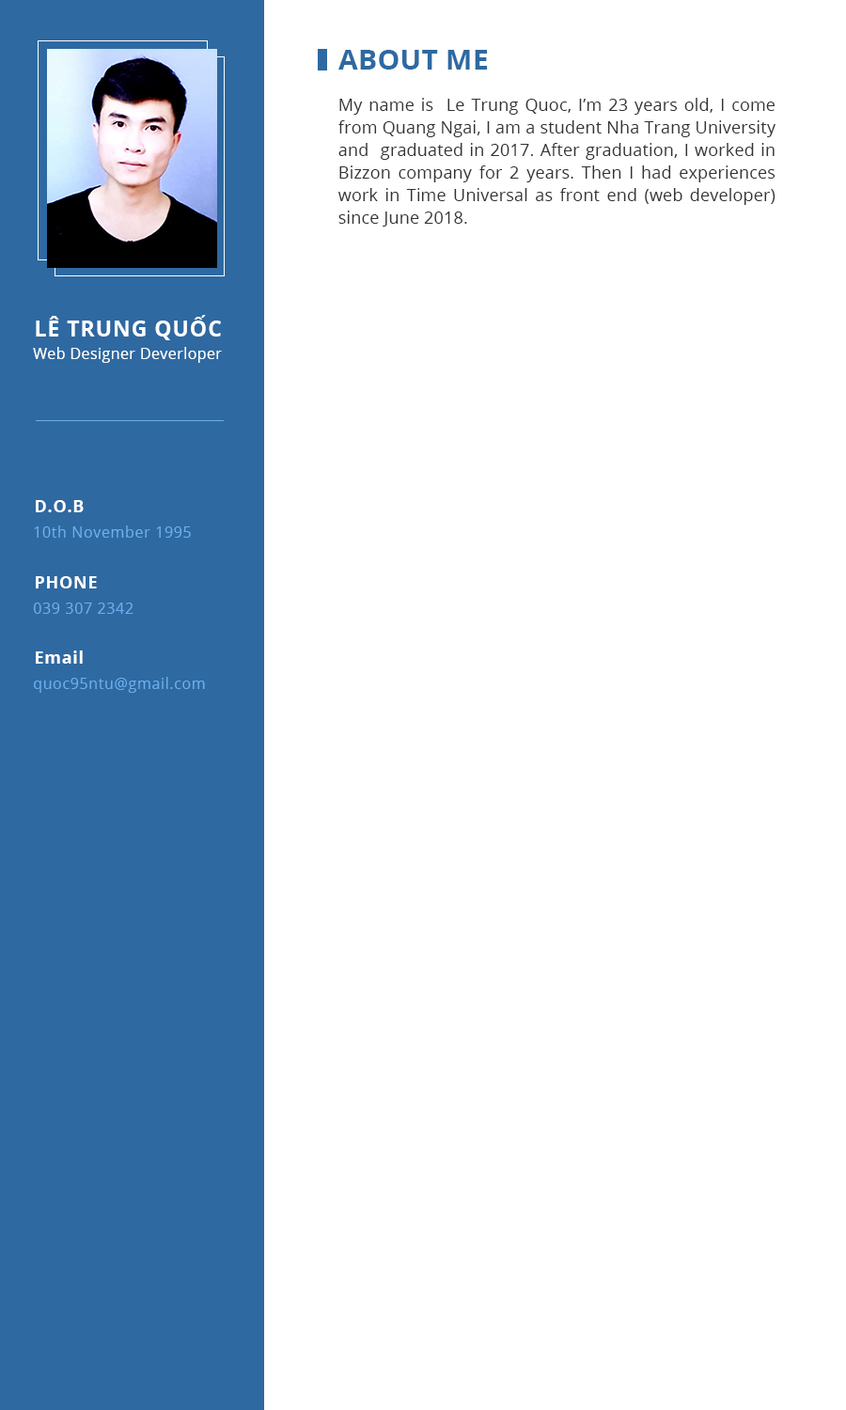
<style>
.page{position:relative;width:846px;height:1410px;background:#ffffff}
.page>*{position:absolute;margin:0}
.t1{font:28.2px "OpenSans-Bold";letter-spacing:0.01em;color:#2e69a1;text-transform:uppercase}
.t2{font:16.9px/22.6px "OpenSans";letter-spacing:0.01em;color:#333333}
.t3{font:21.7px "OpenSans-Bold";letter-spacing:0.04em;color:#ffffff;text-transform:uppercase}
.t4{font:14.7px "OpenSans";letter-spacing:0.04em;color:#ffffff}
.t5{font:16.9px "OpenSans-Bold";letter-spacing:0.04em;color:#ffffff}
.t6{font:15px "OpenSans";letter-spacing:0.04em;color:#6dafee}
</style>
<div class="page">
<p class="t1" style="left:338px;top:50px;width:149px;height:20px">About me</p>
<p class="t2" style="left:338px;top:98px;width:437px;height:128px;text-align:justify">My name is  Le Trung Quoc, I’m 23 years old, I come from Quang Ngai, I am a student Nha Trang University  and  graduated in 2017. After graduation, I worked in Bizzon company for 2 years. Then I had experiences work in Time Universal as front end (web developer) since June 2018.</p>
<p class="t3" style="left:36px;top:315px;width:185px;height:25px">Lê trung Quốc</p>
<p class="t4" style="left:33px;top:347px;width:189px;height:16px">Web Designer Deverloper</p>
<p class="t5" style="left:36px;top:500px;width:48px;height:12px">D.O.B</p>
<p class="t6" style="left:34px;top:525px;width:157px;height:13px">10th November 1995</p>
<p class="t5" style="left:36px;top:576px;width:61px;height:12px">PHONE</p>
<p class="t6" style="left:33px;top:602px;width:100px;height:12px">039 307 2342</p>
<p class="t5" style="left:36px;top:650px;width:47px;height:14px">Email</p>
<p class="t6" style="left:34px;top:677px;width:171px;height:16px">quoc95ntu@gmail.com</p>
</div>
